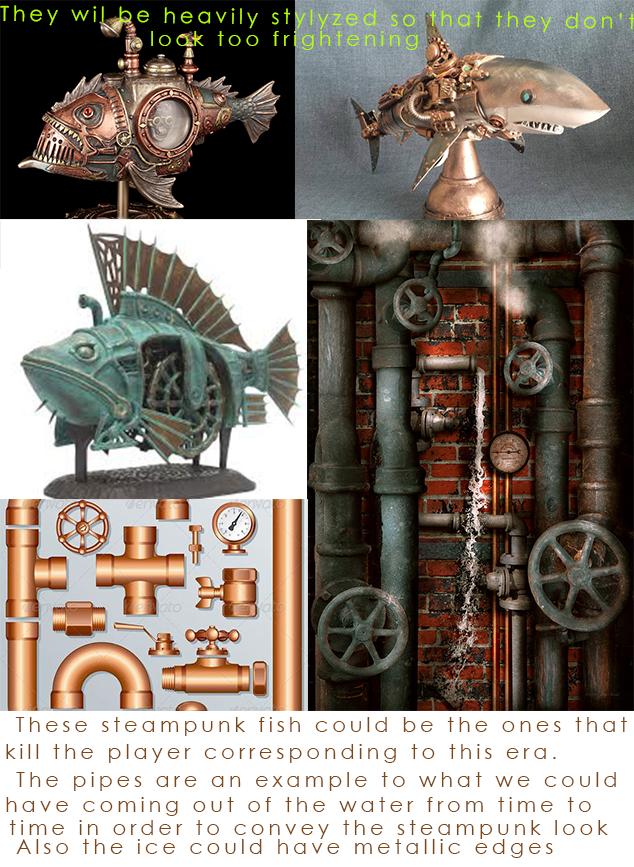
<style>
.page{position:relative;width:634px;height:867px;background:#ffffff}
.page>*{position:absolute;margin:0}
.t1{font:21px "CenturyGothic";letter-spacing:0.18em;color:#b3ff00}
.t2{font:21px "CenturyGothic";letter-spacing:0.18em;color:#7d4814}
</style>
<div class="page">
<p class="t1" style="left:0px;top:5px;width:636px;height:28px;rotate:1deg">They wil be heavily stylyzed so that they don’t</p>
<p class="t1" style="left:151px;top:31px;width:267px;height:19px">look too frightening</p>
<p class="t2" style="left:15px;top:717px;width:612px;height:19px">These steampunk fish could be the ones that</p>
<p class="t2" style="left:6px;top:744px;width:550px;height:19px">kill the player corresponding to this era.</p>
<p class="t2" style="left:16px;top:772px;width:600px;height:19px">The pipes are an example to what we could</p>
<p class="t2" style="left:6px;top:797px;width:585px;height:19px">have coming out of the water from time to</p>
<p class="t2" style="left:9px;top:820px;width:599px;height:19px">time in order to convey the steampunk look</p>
<p class="t2" style="left:16px;top:839px;width:537px;height:19px">Also the ice could have metallic edges</p>
</div>
